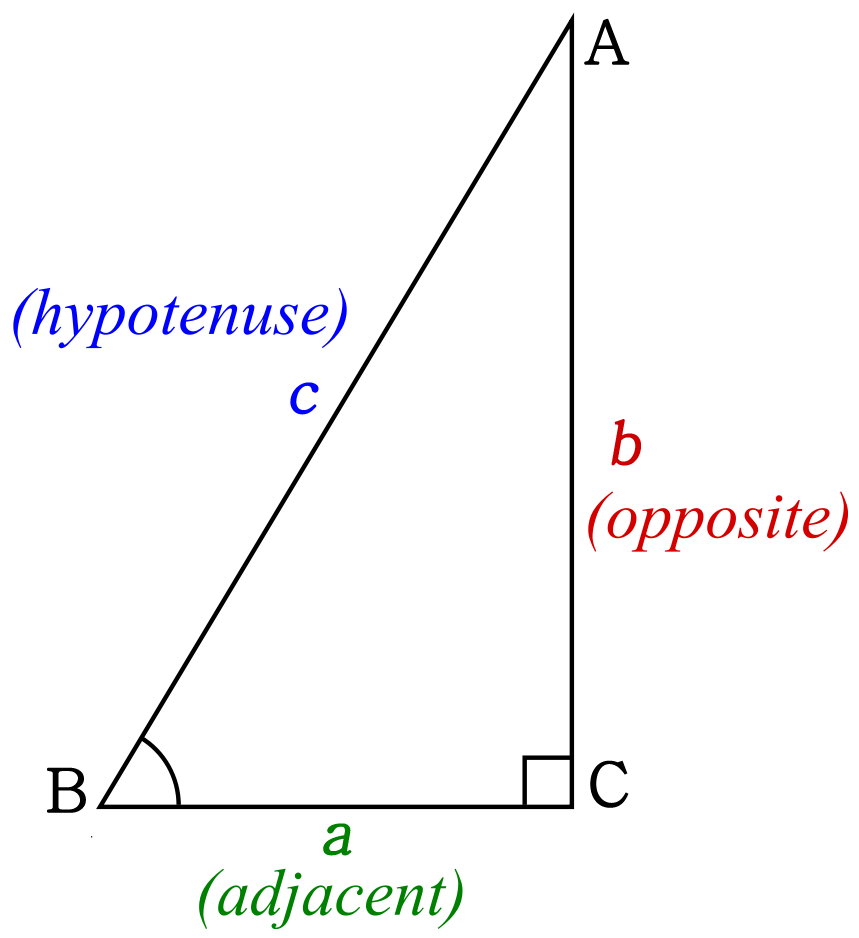
<style>
.page{position:relative;width:859px;height:938px;background:#ffffff}
.page>*{position:absolute;margin:0}
.t1{font:60px "Batang";color:#000000;font-weight:bold}
.t2{font:60px "Batang";color:#0000ff;font-weight:bold;font-style:italic}
.t3{font:60px "Batang";color:#cc0000;font-weight:bold;font-style:italic}
.t4{font:60px "Batang";color:#008000;font-weight:bold;font-style:italic}
</style>
<div class="page">
<p class="t1" style="left:584px;top:18px;width:46px;height:47px">A</p>
<p class="t2" style="left:290px;top:382px;width:29px;height:33px">c</p>
<p class="t3" style="left:611px;top:419px;width:30px;height:47px">b</p>
<p class="t1" style="left:590px;top:760px;width:39px;height:48px">C</p>
<p class="t1" style="left:47px;top:767px;width:39px;height:46px">B</p>
<p class="t4" style="left:323px;top:823px;width:29px;height:33px">a</p>
</div>
